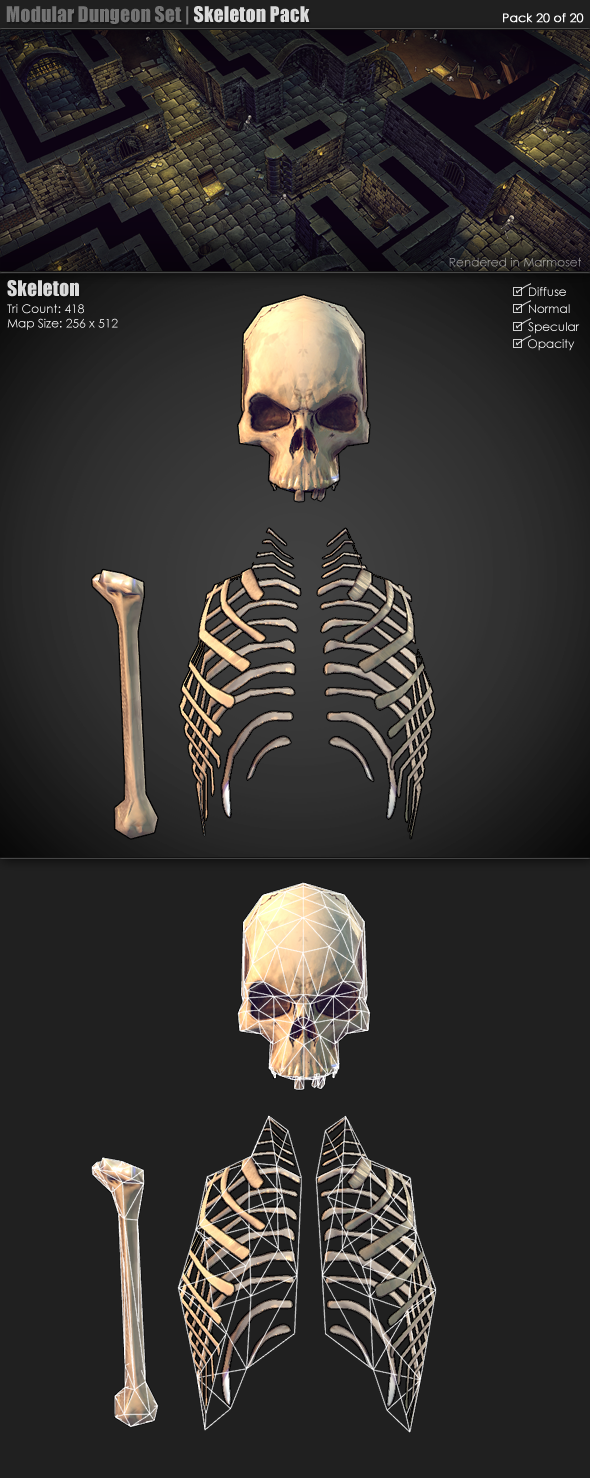
<style>
.page{position:relative;width:590px;height:1478px;background:#202020}
.page>*{position:absolute;margin:0}
.t1{font:20px "Impact";color:#737373}
.t2{font:20px "Impact";color:#dadada}
.t3{font:12px "CenturyGothic";color:#ffffff;font-weight:bold}
.t4{font:12px "CenturyGothic";color:#a0a09c}
.t5{font:12px "CenturyGothic";color:#ffffff}
</style>
<div class="page">
<p class="t1" style="left:6px;top:6px;width:304px;height:19px">Modular Dungeon Set |<span class="t2"> Skeleton Pack</span></p>
<p class="t3" style="left:503px;top:13px;width:81px;height:10px">Pack 20 of 20</p>
<p class="t4" style="left:449px;top:257px;width:132px;height:10px">Rendered in Marmoset</p>
<p class="t2" style="left:7px;top:280px;width:72px;height:17px">Skeleton</p>
<p class="t5" style="left:7px;top:304px;width:111px;height:26px">Tri Count: 418<br>Map Size: 256 x 512</p>
</div>
